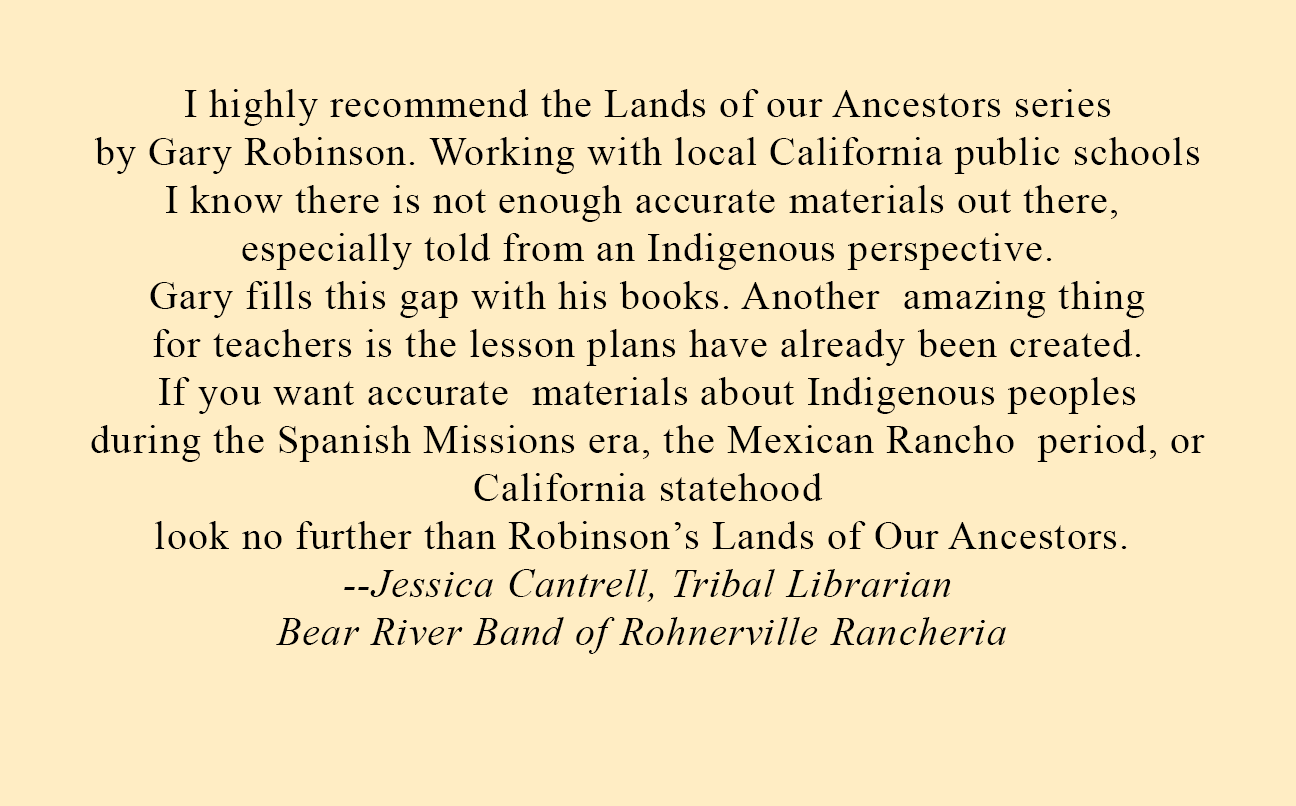
<style>
.page{position:relative;width:1296px;height:806px;background:#ffedc4}
.page>*{position:absolute;margin:0}
.t1{font:40px/48px "TimesNewRomanPSMT";letter-spacing:0.03em;color:#000000}
.t2{font:40px/48px "TimesNewRomanPS-ItalicMT";letter-spacing:0.03em;color:#000000}
</style>
<div class="page">
<p class="t1" style="left:91px;top:89px;width:1114px;height:565px;text-align:center">I highly recommend the Lands of our Ancestors series <br>by Gary Robinson. Working with local California public schools <br>I know there is not enough accurate materials out there,  <br>especially told from an Indigenous perspective. <br>Gary fills this gap with his books. Another  amazing thing <br>for teachers is the lesson plans have already been created. <br>If you want accurate  materials about Indigenous peoples <br>during the Spanish Missions era, the Mexican Rancho  period, or <br>California statehood <br>look no further than Robinson’s Lands of Our Ancestors.  <br><span class="t2">--Jessica Cantrell, Tribal Librarian <br>Bear River Band of Rohnerville Rancheria</span></p>
</div>
